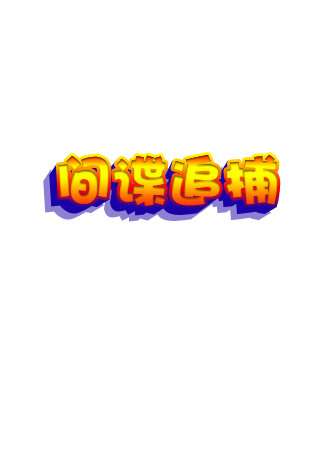
<style>
.page{position:relative;width:320px;height:460px;background:#ffffff}
.page>*{position:absolute;margin:0}
.t1{font:56px "DFPHaiBaoW12"}
</style>
<div class="page">
<p class="t1" style="left:58px;top:154px;width:220px;height:52px">间谍追捕</p>
<p class="t1" style="left:58px;top:154px;width:220px;height:52px">间谍追捕</p>
</div>
